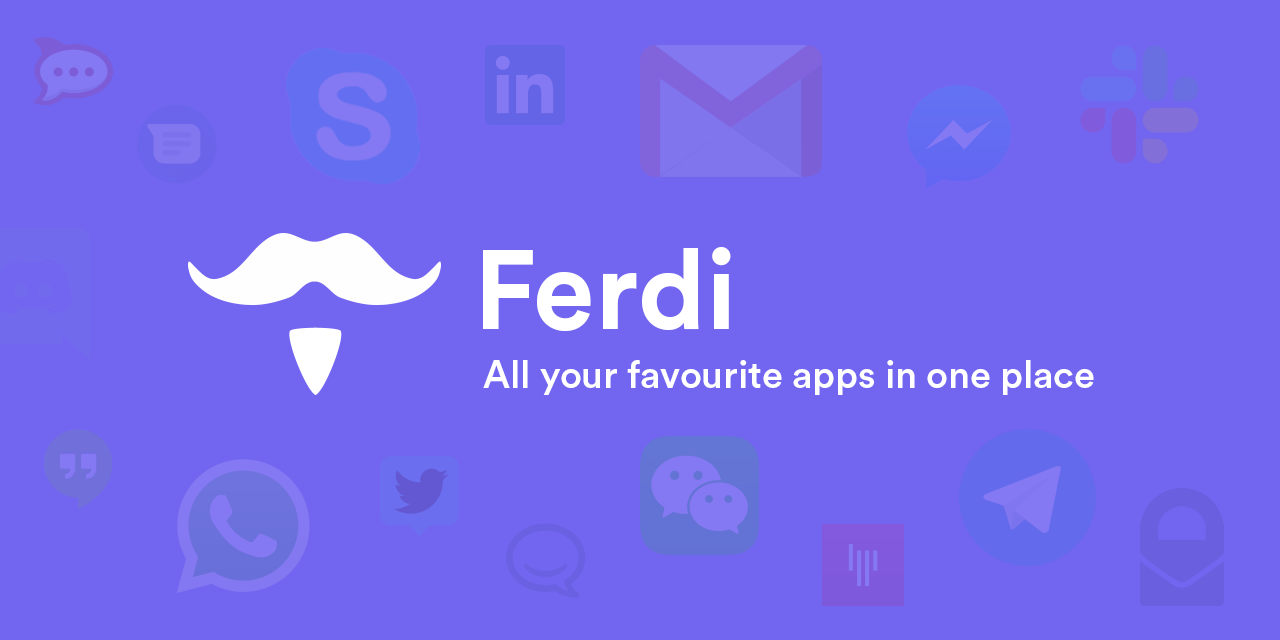
<style>
.page{position:relative;width:1280px;height:640px;background:#7265f0}
.page>*{position:absolute;margin:0}
.t1{font:111px "CircularStd-Bold";color:#ffffff}
.t2{font:38px "CircularStd-Medium";color:#ffffff}
</style>
<div class="page">
<p class="t1" style="left:483px;top:247px;width:248px;height:85px">Ferdi</p>
<p class="t2" style="left:483px;top:360px;width:611px;height:35px">All your favourite apps in one place</p>
</div>
